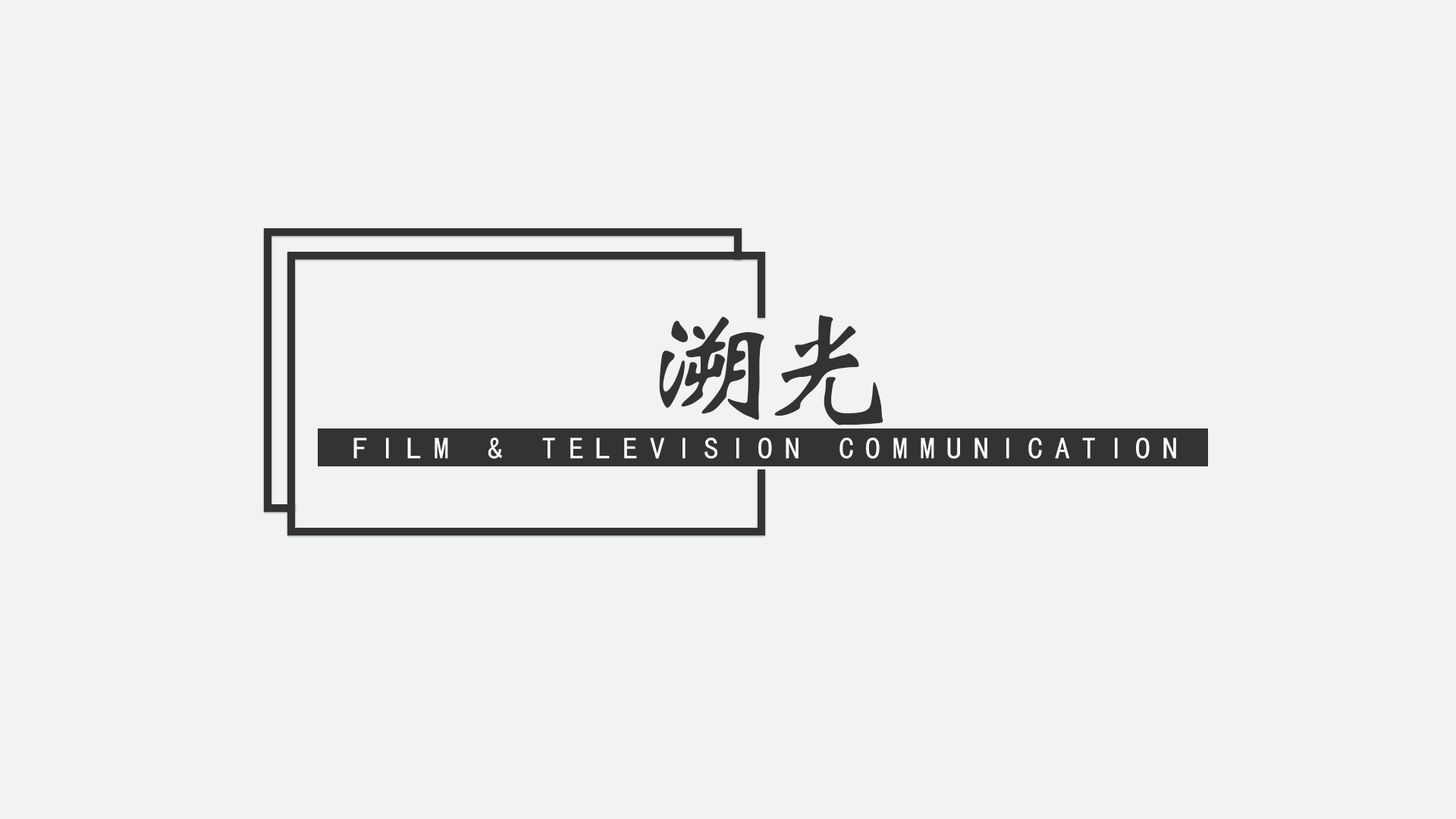
<style>
.page{position:relative;width:1456px;height:819px;background:#f1f2f2}
.page>*{position:absolute;margin:0}
.t1{font:136.5px "STXinwei";letter-spacing:-0.16em;color:#333333}
.t2{font:30.3px "KaiTi";letter-spacing:0.39em;color:#ffffff}
</style>
<div class="page">
<p class="t1" style="left:659px;top:315px;width:224px;height:110px">溯光</p>
<p class="t2" style="left:353px;top:438px;width:823px;height:21px">FILM &amp; TELEVISION COMMUNICATION</p>
</div>
